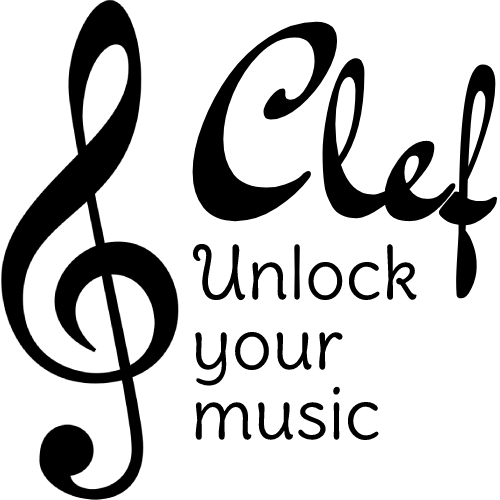
<style>
.page{position:relative;width:500px;height:500px;background:#ffffff}
.page>*{position:absolute;margin:0}
.t1{font:242px "DrSugiyama-Regular";color:#000000}
.t2{font:72px "DeliusSwashCaps-Regular";color:#000000}
</style>
<div class="page">
<p class="t1" style="left:192px;top:21px;width:306px;height:278px">Clef</p>
<p class="t2" style="left:192px;top:243px;width:225px;height:198px">Unlock<br>your<br>music</p>
</div>
